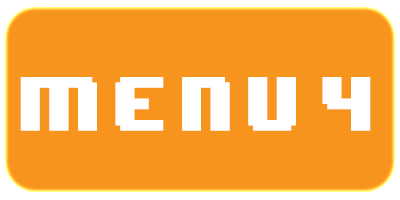
<style>
.page{position:relative;width:400px;height:200px;background:#f7941d}
.page>*{position:absolute;margin:0}
.t1{font:64.3px "8BITWONDERNominal";letter-spacing:0.16em;color:#ffffff;scale:0.89 1}
</style>
<div class="page">
<p class="t1" style="left:20px;top:77px;width:351px;height:54px">Menu 4</p>
</div>
